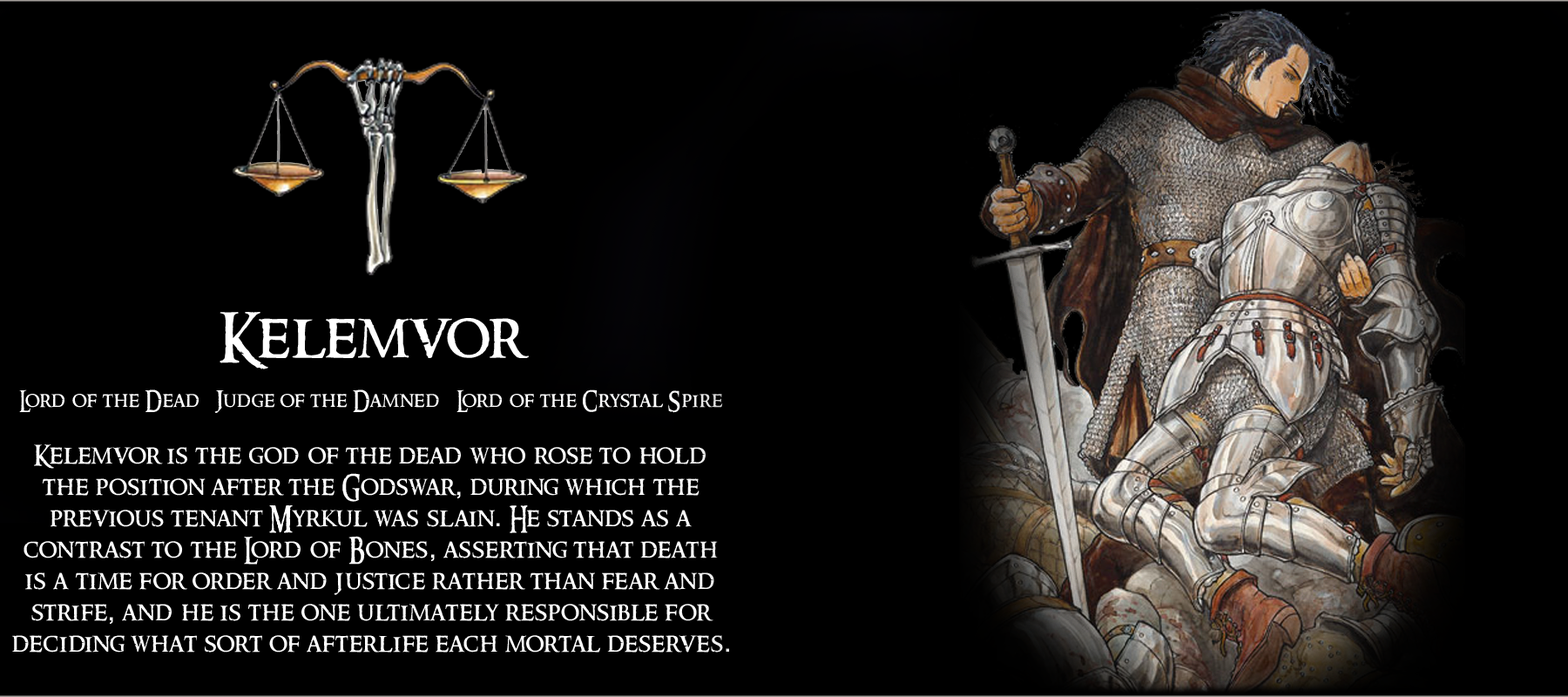
<style>
.page{position:relative;width:1568px;height:697px;background:#000000}
.page>*{position:absolute;margin:0}
.t1{font:26.1px "RingbearerMedium";letter-spacing:0.025em;color:#ffffff}
.t2{font:62.7px "RingbearerMedium";letter-spacing:0.025em;color:#ffffff}
.t3{font:20.9px "RingbearerMedium";letter-spacing:0.025em;color:#ffffff}
.t4{font:26.1px "Rockwell";letter-spacing:0.025em;color:#ffffff}
</style>
<div class="page">
<p class="t1" style="left:12px;top:312px;width:717px;height:340px;text-align:center"><span class="t2">Kelemvor<br></span><span class="t3"><br>Lord of the Dead   Judge of the Damned   Lord of the Crystal Spire<br><br></span>Kelemvor is the god of the dead who rose to hold<br>the position after the Godswar<span class="t4">,</span> during which the<br>previous tenant Myrkul was slain<span class="t4">.</span> He stands as a<br>contrast to the Lord of Bones<span class="t4">,</span> asserting that death<br>is a time for order and justice rather than fear and<br>strife<span class="t4">,</span> and he is the one ultimately responsible for<br>deciding what sort of afterlife each mortal deserves<span class="t4">.</span></p>
</div>
